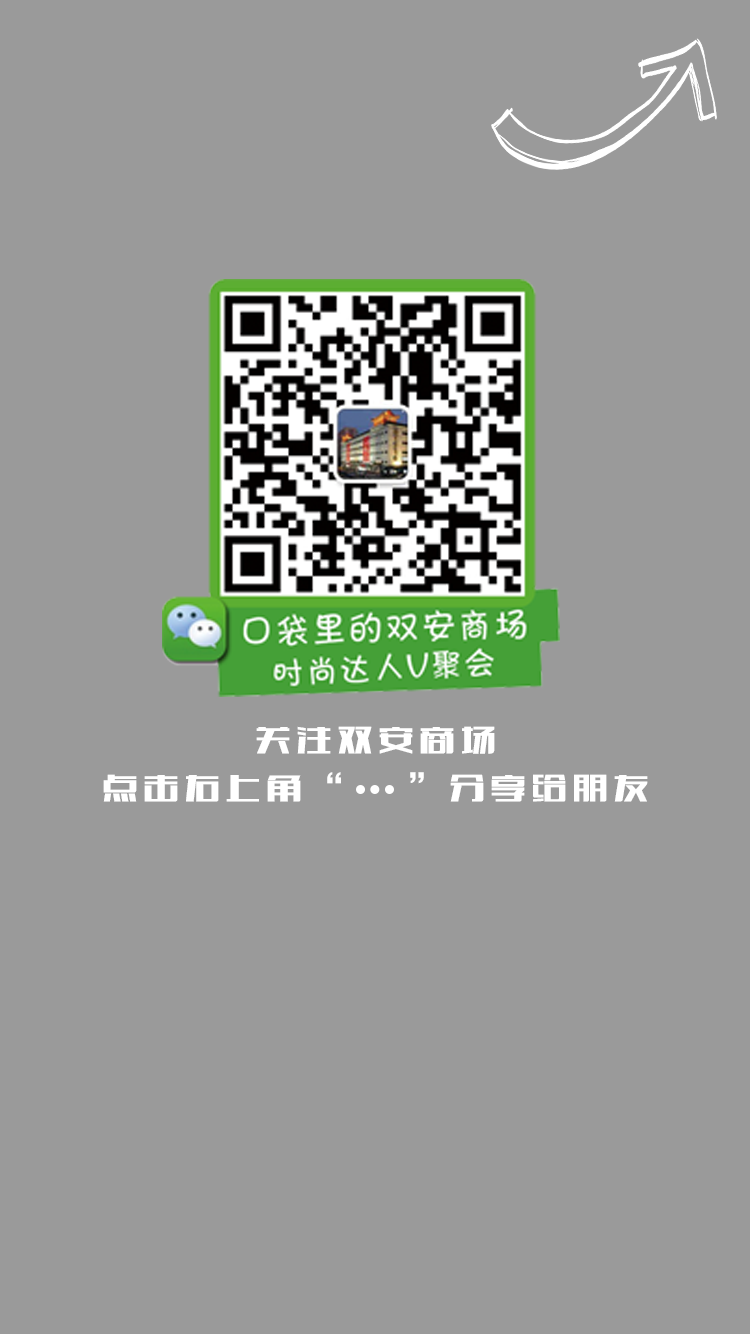
<style>
.page{position:relative;width:750px;height:1334px;background:#9a9a9a}
.page>*{position:absolute;margin:0}
.t1{font:36px/48px "FZCTHJW--GB1-0";letter-spacing:0.14em;color:#ffffff}
</style>
<div class="page">
<p class="t1" style="left:103px;top:726px;width:545px;height:76px;text-align:center">关注双安商场<br>点击右上角“    ”分享给朋友</p>
</div>
